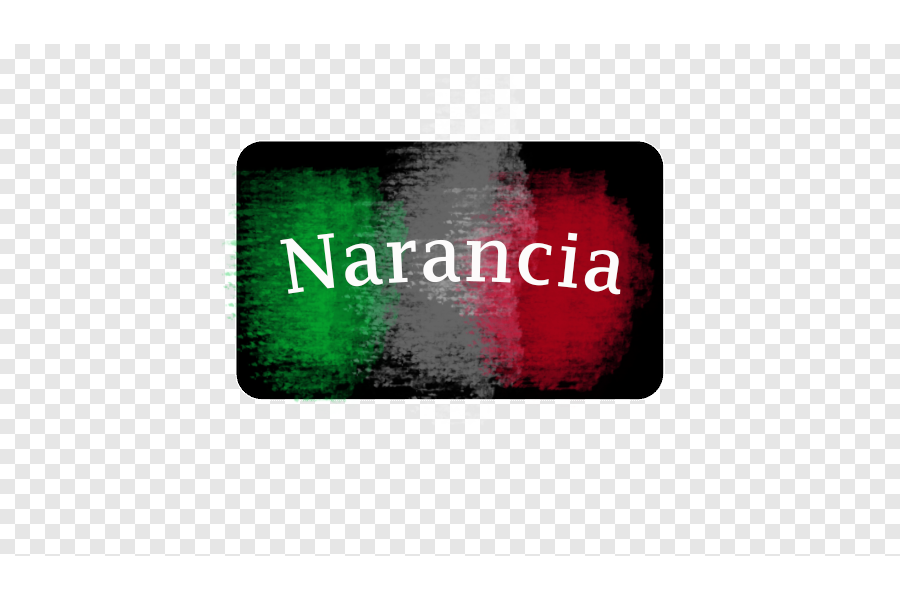
<style>
.page{position:relative;width:900px;height:600px;background:#ffffff}
.page>*{position:absolute;margin:0}
.t1{font:75px "LucidaFax";color:#fcfbfb}
</style>
<div class="page">
<p class="t1" style="left:280px;top:232px;width:341px;height:63px">Narancia</p>
</div>
